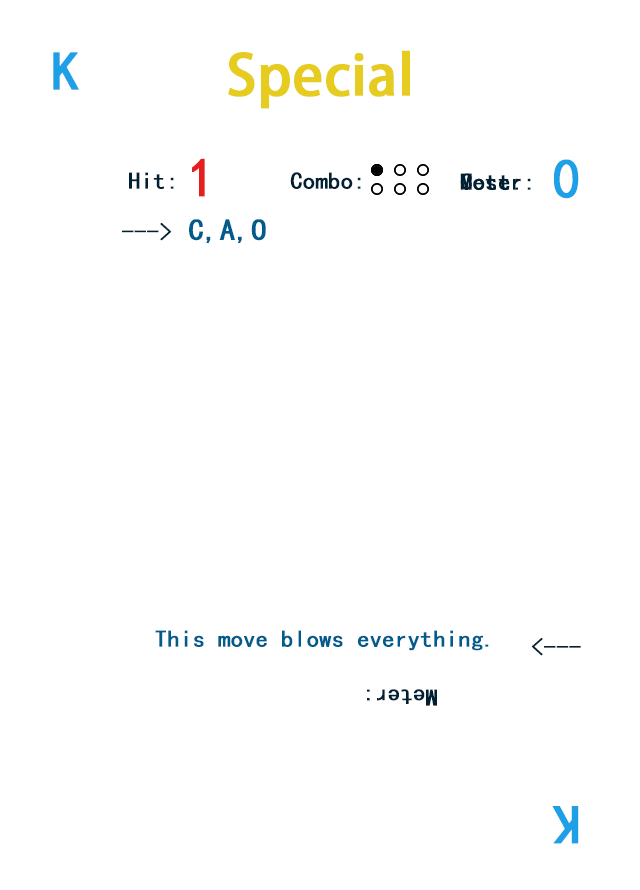
<style>
.page{position:relative;width:640px;height:890px;background:#ffffff}
.page>*{position:absolute;margin:0}
.t1{font:55px "SimHei";color:#1ea0e6;font-weight:bold}
.t2{font:55px "AdobeHeitiStd-Regular";color:#e5cc1e;font-weight:bold}
.t3{font:55px "SimHei";color:#e51e1e;font-weight:bold}
.t4{font:24px "SimHei";color:#002133;font-weight:bold}
.t5{font:30px "SimHei";color:#005c8d;font-weight:bold}
.t6{font:24px "SimHei";color:#005c8d;font-weight:bold}
</style>
<div class="page">
<p class="t1" style="left:53px;top:52px;width:26px;height:38px">K</p>
<p class="t2" style="left:228px;top:50px;width:182px;height:59px">Special</p>
<p class="t3" style="left:192px;top:158px;width:13px;height:39px">1</p>
<p class="t1" style="left:554px;top:159px;width:25px;height:40px">0</p>
<p class="t4" style="left:129px;top:172px;width:45px;height:17px">Hit:</p>
<p class="t4" style="left:290px;top:172px;width:71px;height:17px">Combo:</p>
<p class="t4" style="left:460px;top:173px;width:58px;height:17px">Cost:</p>
<p class="t4" style="left:460px;top:173px;width:71px;height:17px">Meter:</p>
<p class="t5" style="left:189px;top:219px;width:77px;height:24px">C,A,O</p>
<p class="t4" style="left:122px;top:223px;width:50px;height:18px">---&gt;</p>
<p class="t6" style="left:155px;top:630px;width:334px;height:21px">This move blows everything.</p>
<p class="t4" style="left:531px;top:638px;width:50px;height:18px;rotate:180deg">---&gt;</p>
<p class="t4" style="left:367px;top:689px;width:70px;height:17px;rotate:180deg">Meter:</p>
<p class="t1" style="left:552px;top:806px;width:27px;height:38px;rotate:180deg">K</p>
</div>
